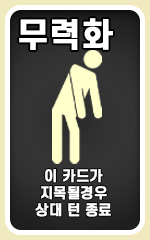
<style>
.page{position:relative;width:150px;height:240px}
.page>*{position:absolute;margin:0}
.t1{font:32.7px "S-CoreDream-6Bold";color:#ffffff;font-weight:bold}
.t2{font:13.9px/17.1px "S-CoreDream-6Bold";color:#ffffff;font-weight:bold}
</style>
<div class="page">
<p class="t1" style="left:19px;top:18px;width:94px;height:32px">무력화</p>
<p class="t2" style="left:35px;top:169px;width:76px;height:48px;text-align:center">이 카드가<br>지목될경우<br>상대 턴 종료</p>
</div>
